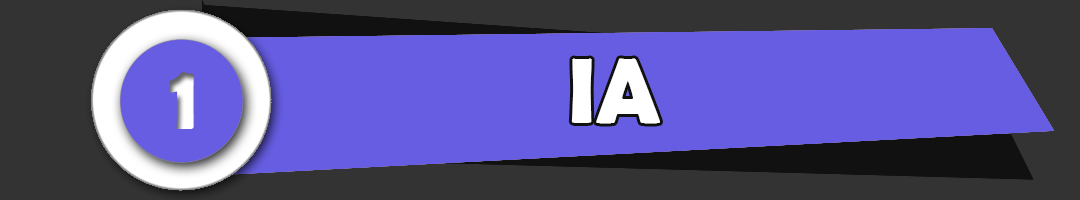
<style>
.page{position:relative;width:1080px;height:200px;background:#665de3}
.page>*{position:absolute;margin:0}
.t1{font:93px "BerlinSansFBDemi-Bold";color:#ffffff}
</style>
<div class="page">
<p class="t1" style="left:571px;top:58px;width:89px;height:66px">IA</p>
<p class="t1" style="left:169px;top:72px;width:26px;height:57px">1</p>
</div>
